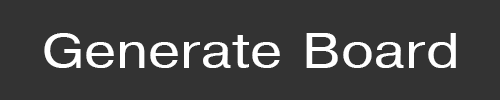
<style>
.page{position:relative;width:500px;height:100px;background:#333333}
.page>*{position:absolute;margin:0}
.t1{font:48px "Helvetica";color:#ffffff;scale:1.2 1}
</style>
<div class="page">
<p class="t1" style="left:44px;top:33px;width:412px;height:35px">Generate Board</p>
</div>
